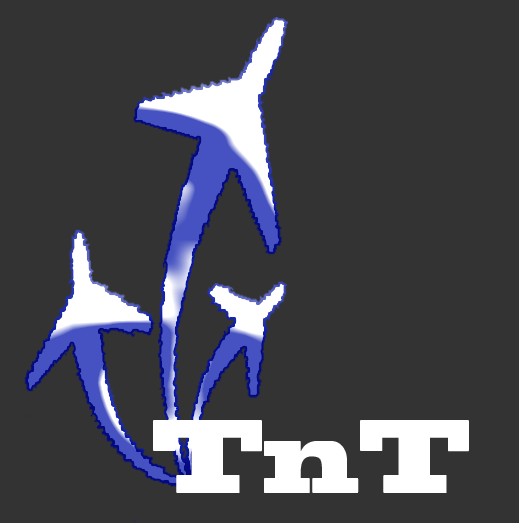
<style>
.page{position:relative;width:519px;height:523px;background:#333333}
.page>*{position:absolute;margin:0}
.t1{font:97.4px "BlackoakStd";color:#ffffff;scale:0.63 1}
</style>
<div class="page">
<p class="t1" style="left:153px;top:420px;width:316px;height:73px">TnT</p>
</div>
